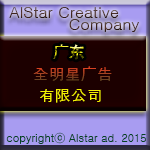
<style>
.page{position:relative;width:150px;height:150px;background:#1c0000}
.page>*{position:absolute;margin:0}
.t1{font:16px "Gulim"}
.t2{font:16px "AdobeHeitiStd-Regular"}
.t3{font:16px "Gulim";color:#f4f104}
.t4{font:11px "Gulim";color:#044323}
</style>
<div class="page">
<p class="t1" style="left:9px;top:7px;width:110px;height:11px">AlStar Creative</p>
<p class="t1" style="left:69px;top:19px;width:70px;height:13px">Company</p>
<p class="t1" style="left:53px;top:44px;width:31px;height:16px">广<span class="t2">东</span></p>
<p class="t1" style="left:33px;top:66px;width:79px;height:15px">全明星广告</p>
<p class="t3" style="left:40px;top:89px;width:61px;height:14px">有限公司</p>
<p class="t4" style="left:6px;top:132px;width:140px;height:12px">copyrightⓒ Alstar ad. 2015</p>
</div>
